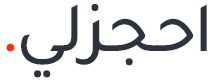
<style>
.page{position:relative;width:219px;height:80px;background:#ffffff}
.page>*{position:absolute;margin:0}
.t1{font:72px "Tajawal-Medium";letter-spacing:-0.02em;color:#2e323c}
.t2{font:72px "Tajawal-Medium";letter-spacing:-0.02em;color:#ff3000}
</style>
<div class="page">
<p class="t1" style="left:6px;top:4px;width:201px;height:74px"><span class="t2">.</span>احجزلي</p>
</div>
